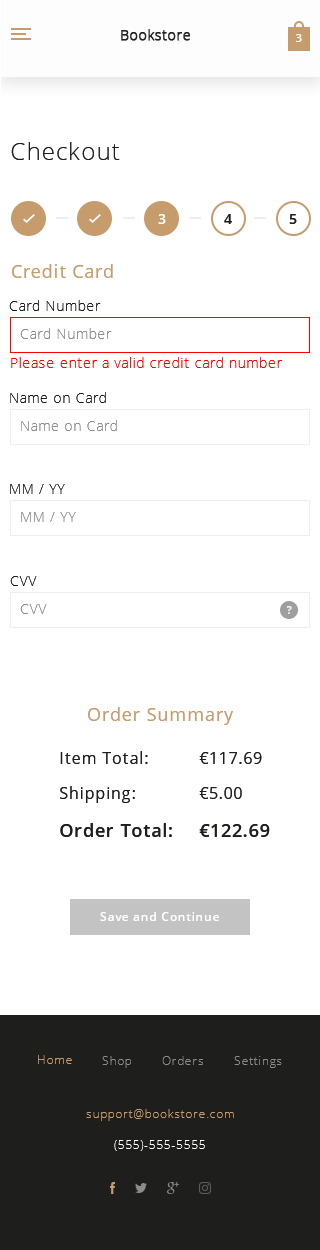
<style>
.page{position:relative;width:320px;height:1250px;background:#ffffff}
.page>*{position:absolute;margin:0}
.t1{font:24px "OpenSans-Light";letter-spacing:0.05em;color:#1e1e1c}
.t2{font:14px "OpenSans-Semibold";letter-spacing:0.05em;color:#fdfdfa}
.t3{font:14px "OpenSans-Semibold";letter-spacing:0.05em;color:#1e1e1c}
.t4{font:18px "OpenSans";letter-spacing:0.05em;color:#c69c6d}
.t5{font:14px "OpenSans-Light";letter-spacing:0.05em;color:#1e1e1c}
.t6{font:14px "OpenSans-Light";letter-spacing:0.05em;color:#8c8c8c}
.t7{font:14px "OpenSans-Light";letter-spacing:0.05em;color:#ff0000}
.t8{font:11px "OpenSans-Bold";letter-spacing:0.05em;color:#eeeeee}
.t9{font:16px "OpenSans";letter-spacing:0.05em;color:#1e1e1c}
.t10{font:18px "OpenSans-Semibold";letter-spacing:0.05em;color:#1e1e1c}
.t11{font:12px "OpenSans-Semibold";letter-spacing:0.05em;color:#fffefe}
</style>
<div class="page">
<p class="t1" style="left:11px;top:142px;width:109px;height:18px">Checkout</p>
<p class="t2" style="left:158px;top:214px;width:8px;height:10px">3</p>
<p class="t3" style="left:224px;top:214px;width:8px;height:10px">4</p>
<p class="t3" style="left:289px;top:214px;width:8px;height:10px">5</p>
<p class="t4" style="left:12px;top:264px;width:101px;height:14px">Credit Card</p>
<p class="t5" style="left:9px;top:300px;width:92px;height:11px">Card Number</p>
<p class="t6" style="left:20px;top:328px;width:92px;height:11px">Card Number</p>
<p class="t7" style="left:11px;top:357px;width:271px;height:11px">Please enter a valid credit card number</p>
<p class="t5" style="left:10px;top:392px;width:96px;height:11px">Name on Card</p>
<p class="t6" style="left:21px;top:420px;width:96px;height:11px">Name on Card</p>
<p class="t5" style="left:10px;top:484px;width:55px;height:10px">MM / YY</p>
<p class="t6" style="left:21px;top:512px;width:55px;height:10px">MM / YY</p>
<p class="t5" style="left:10px;top:576px;width:27px;height:10px">CVV</p>
<p class="t6" style="left:20px;top:604px;width:27px;height:10px">CVV</p>
<p class="t8" style="left:286px;top:606px;width:6px;height:8px">?</p>
<p class="t4" style="left:88px;top:707px;width:145px;height:18px">Order Summary</p>
<p class="t9" style="left:60px;top:751px;width:88px;height:13px">Item Total:</p>
<p class="t9" style="left:199px;top:752px;width:63px;height:12px">€117.69</p>
<p class="t9" style="left:60px;top:786px;width:75px;height:17px">Shipping:</p>
<p class="t9" style="left:199px;top:787px;width:43px;height:12px">€5.00</p>
<p class="t10" style="left:60px;top:823px;width:112px;height:14px">Order Total:</p>
<p class="t10" style="left:199px;top:824px;width:71px;height:13px">€122.69</p>
<p class="t11" style="left:100px;top:912px;width:119px;height:9px">Save and Continue</p>
</div>
